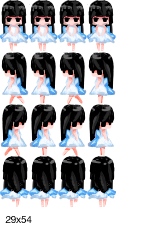
<style>
.page{position:relative;width:144px;height:230px;background:#ffffff}
.page>*{position:absolute;margin:0}
.t1{font:10px "HelveticaNeue";letter-spacing:-0.025em;color:#000000}
</style>
<div class="page">
<p class="t1" style="left:5px;top:216px;width:27px;height:7px">29x54</p>
</div>
